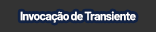
<style>
.page{position:relative;width:156px;height:32px;background:#333333}
.page>*{position:absolute;margin:0}
.t1{font:12px "Barlow-Bold";letter-spacing:-0.05em;color:#ffffff}
</style>
<div class="page">
<p class="t1" style="left:20px;top:11px;width:116px;height:12px">Invocação de Transiente</p>
</div>
